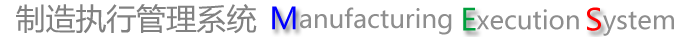
<style>
.page{position:relative;width:680px;height:37px;background:#ffffff}
.page>*{position:absolute;margin:0}
.t1{font:29.9px "MicrosoftYaHei";color:#818181}
.t2{font:29.9px "MicrosoftYaHei";color:#0000ff}
.t3{font:25.2px "MicrosoftYaHei";color:#8e8e8e}
.t4{font:29.9px "MicrosoftYaHei";color:#009f3c}
.t5{font:29.9px "MicrosoftYaHei";color:#ff0000}
</style>
<div class="page">
<p class="t1" style="left:16px;top:4px;width:241px;height:30px">制造执行管理系统</p>
<p class="t2" style="left:272px;top:6px;width:24px;height:24px">M</p>
<p class="t3" style="left:300px;top:7px;width:152px;height:28px">anufacturing</p>
<p class="t4" style="left:463px;top:7px;width:13px;height:24px">E</p>
<p class="t3" style="left:476px;top:9px;width:103px;height:21px">xecution</p>
<p class="t5" style="left:587px;top:7px;width:14px;height:24px">S</p>
<p class="t3" style="left:603px;top:11px;width:71px;height:25px">ystem</p>
</div>
